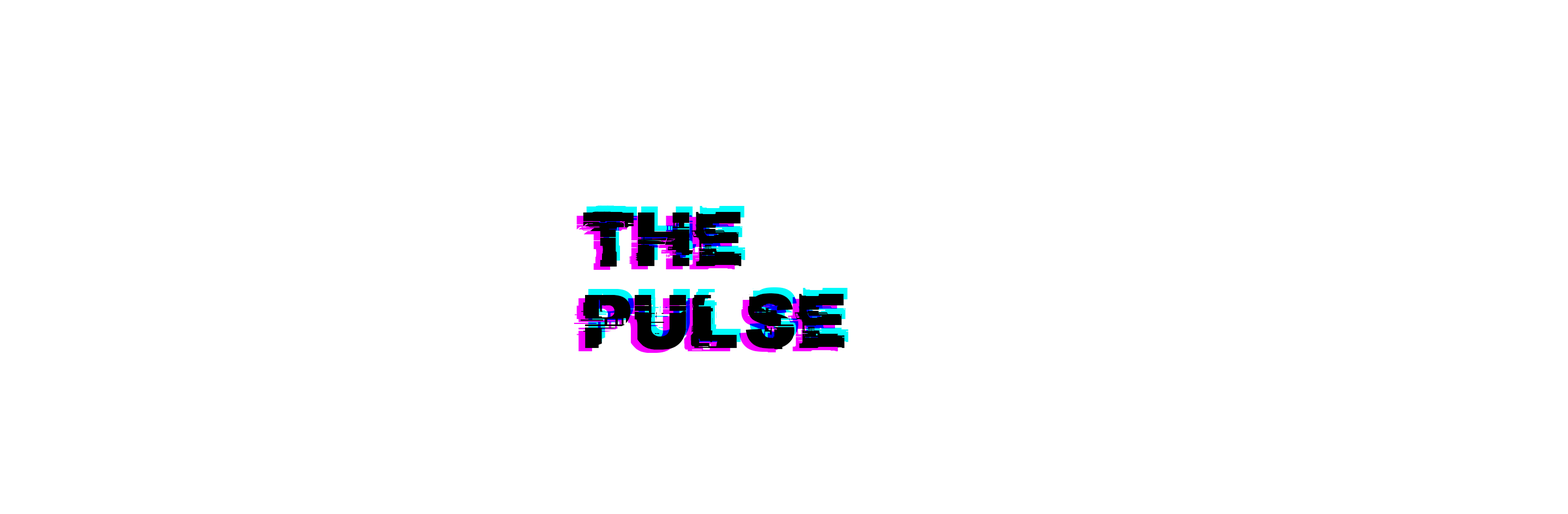
<style>
.page{position:relative;width:1568px;height:514px;background:#ffffff}
.page>*{position:absolute;margin:0}
.t1{font:68.2px "CFGlitchCity-Regular"}
.t2{font:68.2px "CFGlitchCity-Regular";color:#000000}
</style>
<div class="page">
<p class="t1" style="left:583px;top:205px;width:266px;height:138px">THE <br>PULSE</p>
<p class="t1" style="left:574px;top:214px;width:264px;height:139px">THE <br>PULSE</p>
<p class="t2" style="left:580px;top:211px;width:265px;height:138px">THE <br>PULSE</p>
</div>
